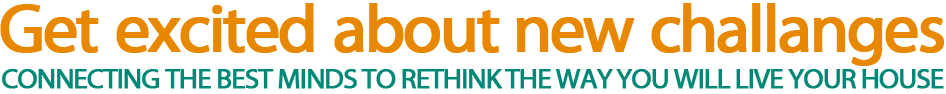
<style>
.page{position:relative;width:946px;height:94px;background:#ffffff}
.page>*{position:absolute;margin:0}
.t1{font:68px "MyriadWebPro";letter-spacing:-0.055em;color:#e88801;font-weight:bold}
.t2{font:28px "MyriadWebPro";letter-spacing:-0.055em;color:#008877;font-weight:bold}
</style>
<div class="page">
<p class="t1" style="left:0px;top:3px;width:944px;height:63px">Get excited about new challanges</p>
<p class="t2" style="left:2px;top:69px;width:942px;height:20px">CONNECTING THE BEST MINDS TO RETHINK THE WAY YOU WILL LIVE YOUR HOUSE</p>
</div>
